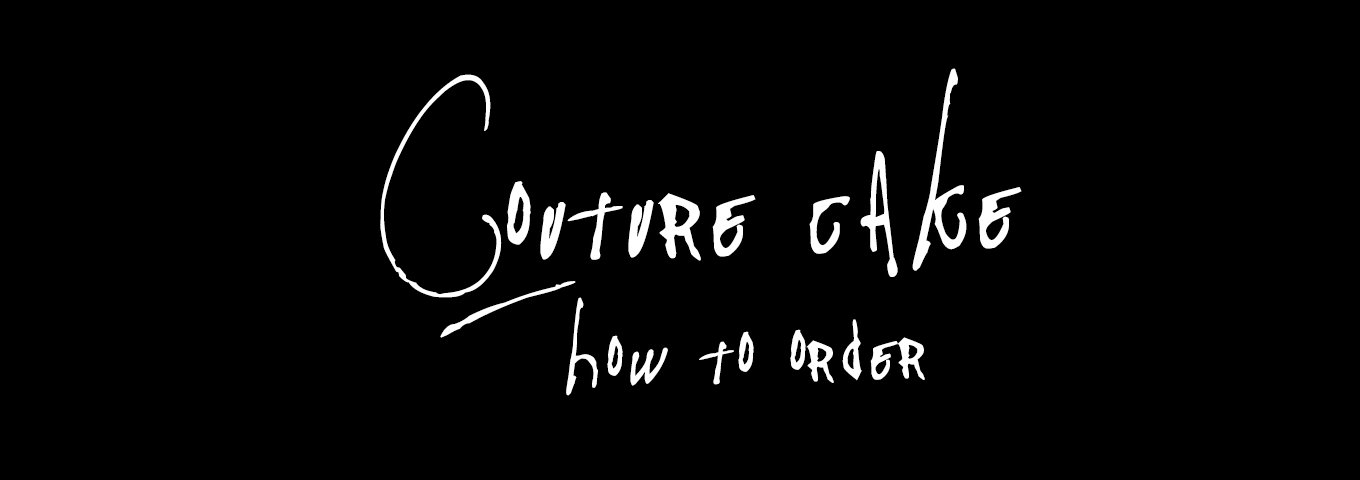
<style>
.page{position:relative;width:1360px;height:480px;background:#000000}
.page>*{position:absolute;margin:0}
.t1{font:299.3px "Pappo'sBluesBandOfficialFont";letter-spacing:0.024em;color:#ffffff}
.t2{font:188.8px "Pappo'sBluesBandOfficialFont";letter-spacing:0.024em;color:#ffffff}
</style>
<div class="page">
<p class="t1" style="left:380px;top:68px;width:642px;height:270px;rotate:-2deg">Couture cake</p>
<p class="t2" style="left:566px;top:297px;width:359px;height:99px;rotate:-2deg">how to order</p>
</div>
